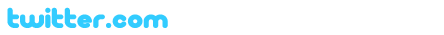
<style>
.page{position:relative;width:444px;height:35px;background:#ffffff}
.page>*{position:absolute;margin:0}
.t1{font:28.2px "twitteru";color:#32ccff;scale:1.08 1}
</style>
<div class="page">
<p class="t1" style="left:7px;top:7px;width:161px;height:21px">twitter.com</p>
</div>
